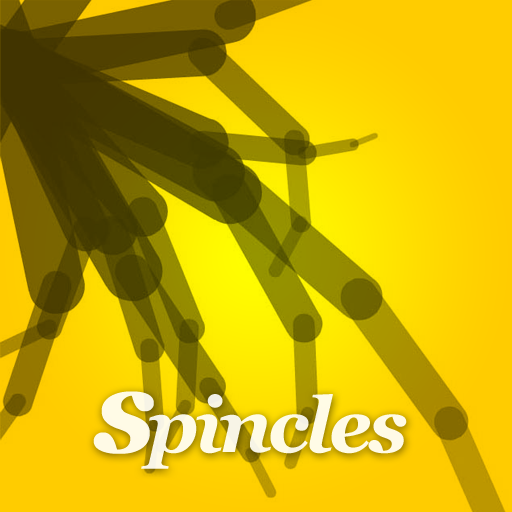
<style>
.page{position:relative;width:512px;height:512px}
.page>*{position:absolute;margin:0}
.t1{font:76.7px "Georgia-BoldItalic";letter-spacing:-0.05em;color:#fffbe6}
.t2{font:122.2px "Georgia-BoldItalic";letter-spacing:-0.07em;color:#fffbe6}
</style>
<div class="page">
<p class="t1" style="left:93px;top:391px;width:314px;height:78px"><span class="t2">s</span>pincles</p>
</div>
